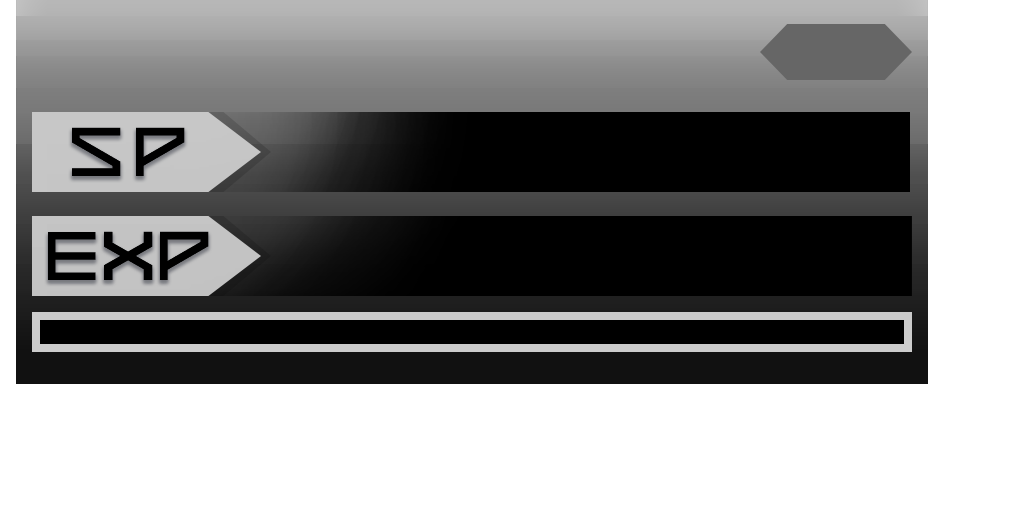
<style>
.page{position:relative;width:1024px;height:512px;background:#ffffff}
.page>*{position:absolute;margin:0}
.t1{font:55px "7THDR2020Regular";letter-spacing:0.15em;color:#000000;text-transform:uppercase}
.t2{font:55px "7THDR2020Regular";letter-spacing:0.02em;color:#000000;text-transform:uppercase}
.t3{font:55px "7THDR2020Regular";color:#000000;text-transform:uppercase}
</style>
<div class="page">
<p class="t1" style="left:72px;top:127px;width:113px;height:49px">SP</p>
<p class="t2" style="left:48px;top:231px;width:161px;height:49px">E<span class="t3">X</span>P</p>
</div>
